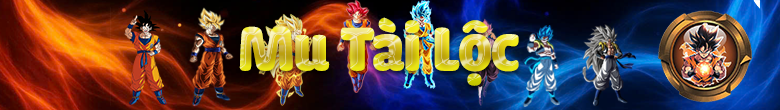
<style>
.page{position:relative;width:780px;height:110px}
.page>*{position:absolute;margin:0}
.t1{font:65px "iCielCadena";letter-spacing:-0.04em;font-weight:bold;scale:0.95 1}
</style>
<div class="page">
<p class="t1" style="left:239px;top:17px;width:280px;height:69px">Mu Tài Lộc</p>
</div>
